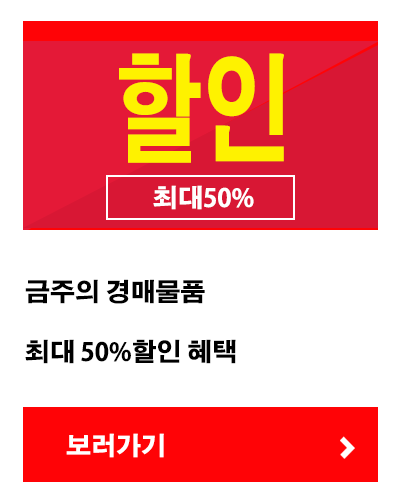
<style>
.page{position:relative;width:400px;height:500px;background:#ffffff}
.page>*{position:absolute;margin:0}
.t1{font:117.6px "AdobeGothicStd-Bold";color:#fef200;scale:0.76 1}
.t2{font:25px "AdobeGothicStd-Bold";color:#ffffff}
.t3{font:25px "AdobeGothicStd-Bold";color:#000000}
</style>
<div class="page">
<p class="t1" style="left:119px;top:53px;width:165px;height:110px">할인</p>
<p class="t2" style="left:153px;top:185px;width:101px;height:25px">최대50%</p>
<p class="t3" style="left:25px;top:279px;width:211px;height:85px">금주의 경매물품<br><br>최대 50%할인 혜택</p>
<p class="t2" style="left:66px;top:433px;width:98px;height:25px">보러가기</p>
</div>
